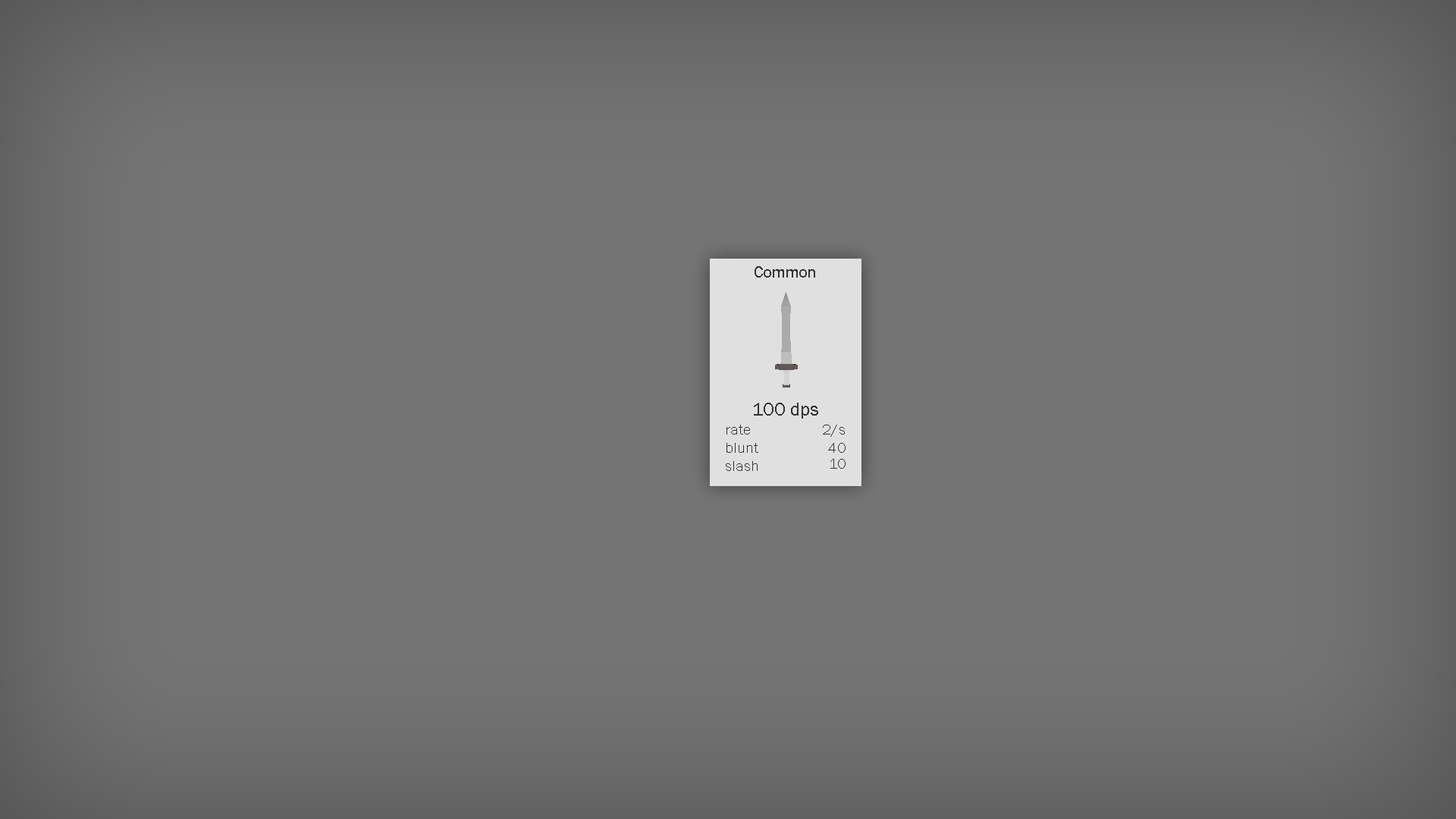
<style>
.page{position:relative;width:1456px;height:819px;background:#747474}
.page>*{position:absolute;margin:0}
.t1{font:16.7px "FranklinGothic-Book";color:#333333}
.t2{font:19px "FranklinGothic-Book";color:#333333}
.t3{font:15.4px "FranklinGothic-Book";color:#333333}
</style>
<div class="page">
<p class="t1" style="left:755px;top:266px;width:60px;height:12px">Common</p>
<p class="t2" style="left:754px;top:403px;width:64px;height:16px">100 dps</p>
<p class="t3" style="left:726px;top:425px;width:24px;height:10px">rate</p>
<p class="t3" style="left:823px;top:425px;width:22px;height:12px">2/s</p>
<p class="t3" style="left:726px;top:443px;width:32px;height:10px">blunt</p>
<p class="t3" style="left:828px;top:443px;width:18px;height:10px">40</p>
<p class="t3" style="left:726px;top:461px;width:32px;height:10px">slash</p>
<p class="t3" style="left:830px;top:459px;width:16px;height:10px">10</p>
</div>
